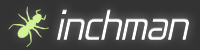
<style>
.page{position:relative;width:200px;height:50px;background:#333333}
.page>*{position:absolute;margin:0}
.t1{font:36px "Zekton-Italic";color:#ffffff}
</style>
<div class="page">
<p class="t1" style="left:56px;top:9px;width:133px;height:31px">inchman</p>
</div>
